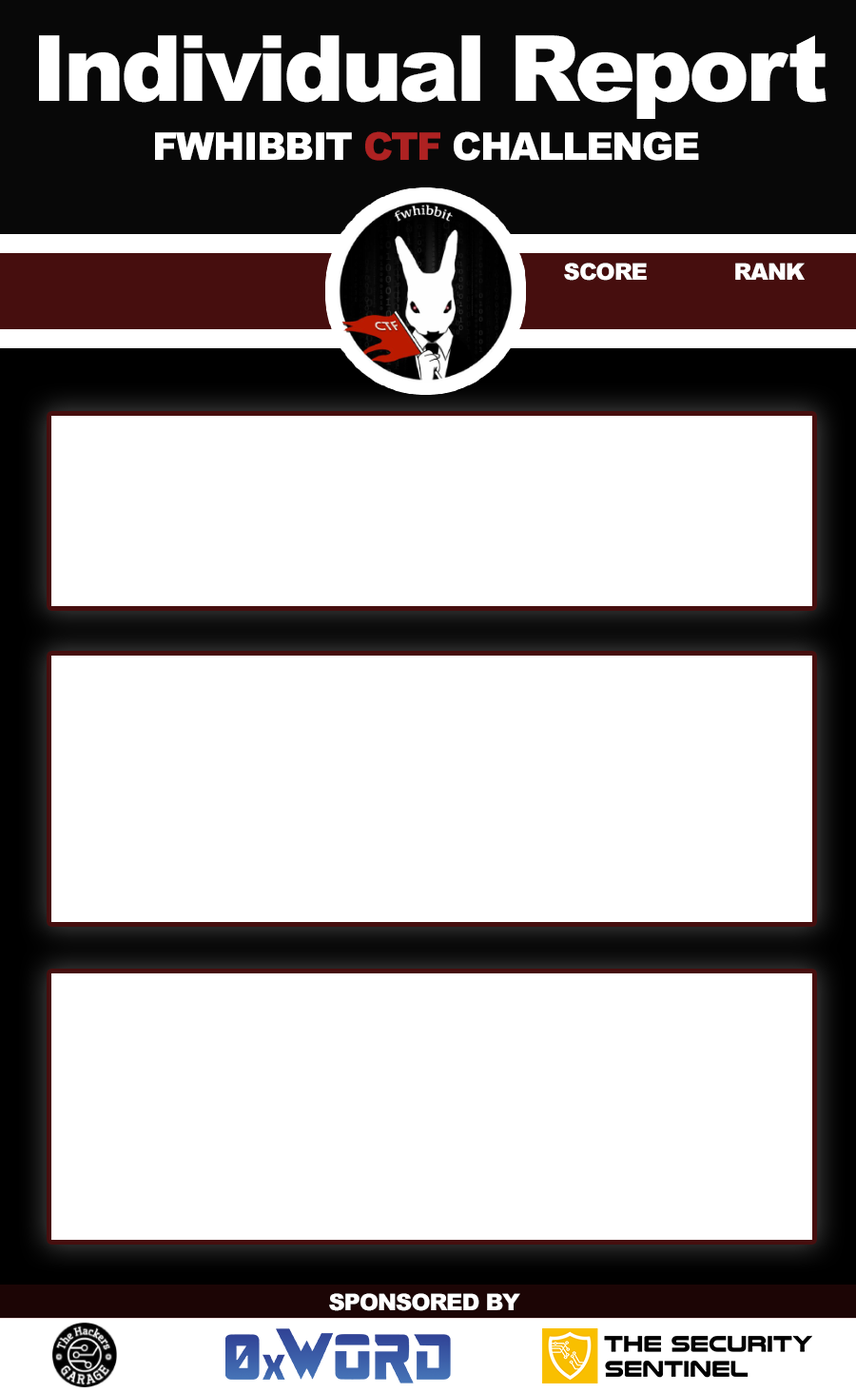
<style>
.page{position:relative;width:856px;height:1393px;background:#ffffff}
.page>*{position:absolute;margin:0}
.t1{font:91.3px "Arial-Black";letter-spacing:-0.04em;color:#ffffff}
.t2{font:38.1px "Arial-Black";letter-spacing:-0.04em;color:#ffffff}
.t3{font:38.1px "Arial-Black";letter-spacing:-0.04em;color:#ae2222}
.t4{font:22.8px "Arial-Black";letter-spacing:-0.04em;color:#ffffff}
</style>
<div class="page">
<p class="t1" style="left:39px;top:35px;width:788px;height:84px">Individual Report</p>
<p class="t2" style="left:155px;top:131px;width:544px;height:30px">FWHIBBIT <span class="t3">CTF </span>CHALLENGE</p>
<p class="t4" style="left:564px;top:263px;width:241px;height:18px">SCORE             RANK</p>
<p class="t4" style="left:329px;top:1293px;width:191px;height:18px">SPONSORED BY</p>
</div>
